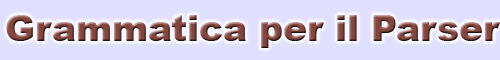
<style>
.page{position:relative;width:500px;height:60px;background:#e1e1ff}
.page>*{position:absolute;margin:0}
.t1{font:36px "Arial-Black"}
</style>
<div class="page">
<p class="t1" style="left:6px;top:15px;width:494px;height:33px">Grammatica per il Parser</p>
</div>
